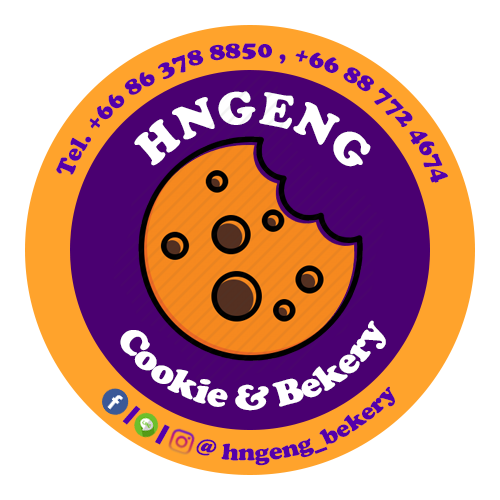
<style>
.page{position:relative;width:500px;height:500px;background:#ffffff}
.page>*{position:absolute;margin:0}
.t1{font:24.2px "CooperBlack";color:#5400ab;scale:1.06 1}
.t2{font:48px "CooperBlack";color:#ffffff}
.t3{font:36px "CooperBlack";color:#ffffff}
.t4{font:36px "CooperBlack";color:#ffffff;scale:1.09 1}
.t5{font:39.9px "CooperBlack";color:#ffffff;scale:1.09 1}
</style>
<div class="page">
<p class="t1" style="left:56px;top:43px;width:392px;height:140px;text-align:center">Tel. +66 86 378 8850 , +66 88 772 4674</p>
<p class="t2" style="left:134px;top:91px;width:237px;height:76px"><span class="t3">                                              </span>HNGENG</p>
<p class="t4" style="left:120px;top:320px;width:266px;height:91px;text-align:center"><span class="t5">                                              </span>Cookie &amp; Bekery</p>
<p class="t1" style="left:122px;top:386px;width:273px;height:80px;text-align:center">|    |     @ hngeng_bekery</p>
</div>
